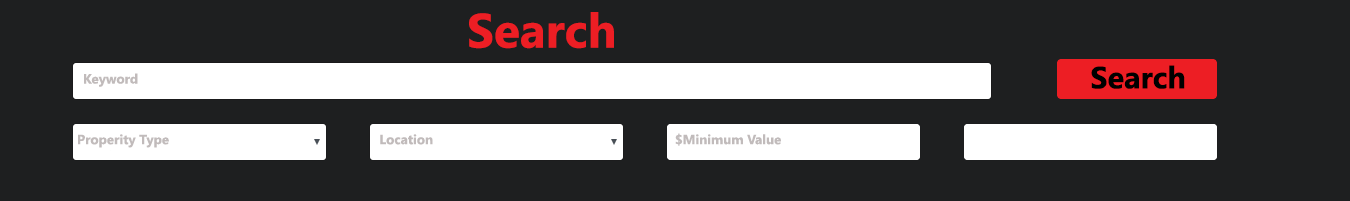
<style>
.page{position:relative;width:1350px;height:201px;background:#1e1f20}
.page>*{position:absolute;margin:0}
.t1{font:48px "LeelawadeeUI-Bold";color:#ed1e24}
.t2{font:30.7px "LeelawadeeUI-Bold";color:#000000}
.t3{font:13.3px "LeelawadeeUI-Bold";color:#c1bbbb}
</style>
<div class="page">
<p class="t1" style="left:469px;top:12px;width:145px;height:37px">Search</p>
<p class="t2" style="left:1091px;top:65px;width:94px;height:24px">Search</p>
<p class="t3" style="left:84px;top:73px;width:54px;height:14px">Keyword</p>
<p class="t3" style="left:78px;top:134px;width:91px;height:14px">Properity Type</p>
<p class="t3" style="left:380px;top:134px;width:53px;height:11px">Location</p>
<p class="t3" style="left:675px;top:133px;width:106px;height:13px">Minimum Value$</p>
</div>
